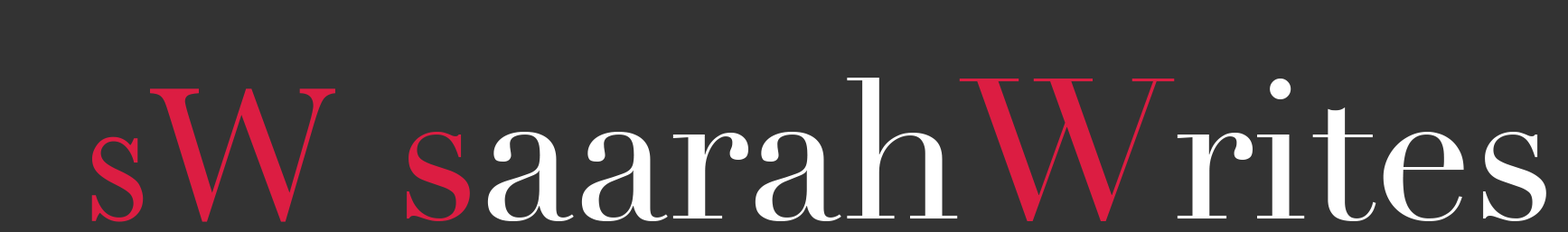
<style>
.page{position:relative;width:1568px;height:232px;background:#333333}
.page>*{position:absolute;margin:0}
.t1{font:195.8px "Didot";color:#ffffff}
.t2{font:195.8px "Didot";color:#dc1d42}
.t3{font:195.8px "Baskerville";color:#dc1d42}
</style>
<div class="page">
<p class="t1" style="left:407px;top:78px;width:1139px;height:143px"><span class="t2">s</span>aarah<span class="t2">W</span>rites</p>
<p class="t3" style="left:91px;top:89px;width:244px;height:133px">sW</p>
</div>
